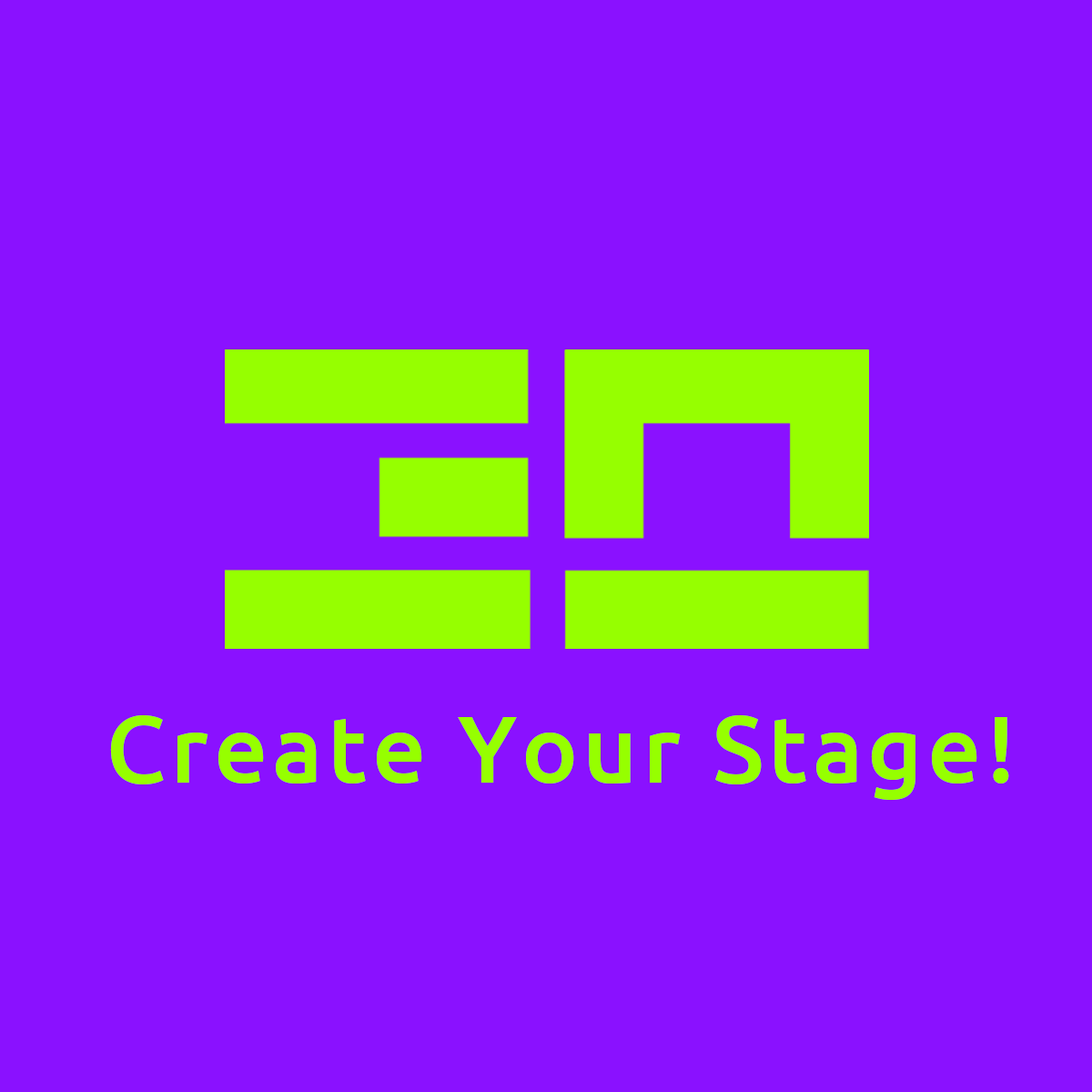
<style>
.page{position:relative;width:1092px;height:1092px;background:#8a11ff}
.page>*{position:absolute;margin:0}
.t1{font:94.6px "Ubuntu-Medium";letter-spacing:0.05em;color:#96ff00}
</style>
<div class="page">
<p class="t1" style="left:110px;top:715px;width:899px;height:85px">Create Your Stage!</p>
</div>
